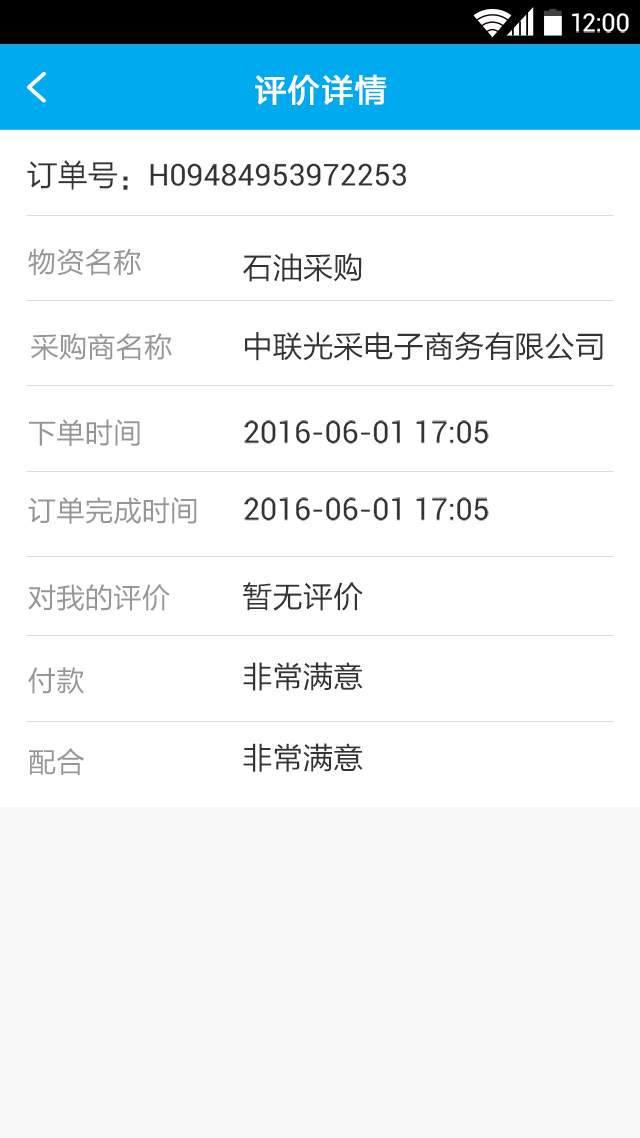
<style>
.page{position:relative;width:640px;height:1138px;background:#ffffff}
.page>*{position:absolute;margin:0}
.t1{font:24.9px "Roboto-Regular";color:#ffffff}
.t2{font:32px "FZLTHJW--GB1-0";letter-spacing:0.02em;color:#ffffff;font-weight:bold}
.t3{font:30.2px "Roboto-Regular";color:#333333}
.t4{font:30.2px "FZLTHJW--GB1-0";color:#333333}
.t5{font:28.4px "FZLTHJW--GB1-0";color:#969696}
</style>
<div class="page">
<p class="t1" style="left:572px;top:13px;width:57px;height:20px">12:00</p>
<p class="t2" style="left:255px;top:74px;width:132px;height:32px">评价详情</p>
<p class="t3" style="left:27px;top:160px;width:379px;height:30px"><span class="t4">订单号：</span>H09484953972253</p>
<p class="t5" style="left:28px;top:248px;width:113px;height:28px">物资名称</p>
<p class="t4" style="left:243px;top:253px;width:119px;height:29px">石油采购</p>
<p class="t5" style="left:31px;top:333px;width:141px;height:27px">采购商名称</p>
<p class="t4" style="left:245px;top:331px;width:358px;height:30px">中联光采电子商务有限公司</p>
<p class="t5" style="left:29px;top:419px;width:111px;height:27px">下单时间</p>
<p class="t3" style="left:244px;top:420px;width:245px;height:24px">2016-06-01 17:05</p>
<p class="t5" style="left:28px;top:497px;width:169px;height:27px">订单完成时间</p>
<p class="t3" style="left:244px;top:497px;width:245px;height:24px">2016-06-01 17:05</p>
<p class="t4" style="left:243px;top:582px;width:120px;height:29px">暂无评价</p>
<p class="t5" style="left:28px;top:584px;width:142px;height:27px">对我的评价</p>
<p class="t4" style="left:243px;top:662px;width:120px;height:29px">非常满意</p>
<p class="t5" style="left:28px;top:667px;width:56px;height:27px">付款</p>
<p class="t5" style="left:29px;top:748px;width:55px;height:27px">配合</p>
<p class="t4" style="left:243px;top:743px;width:120px;height:29px">非常满意</p>
</div>
